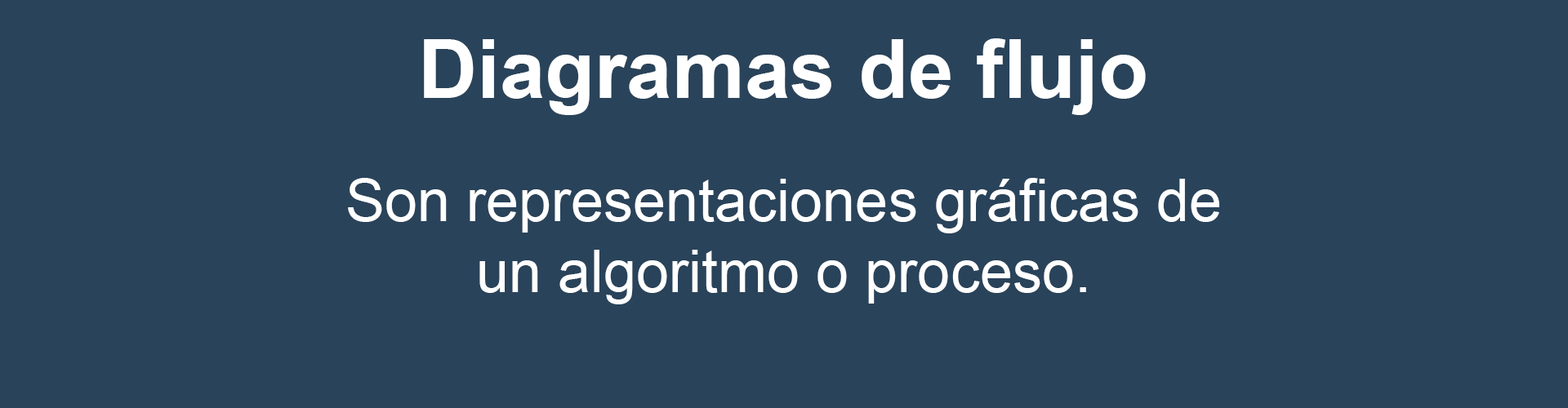
<style>
.page{position:relative;width:1568px;height:408px;background:#29435a}
.page>*{position:absolute;margin:0}
.t1{font:81.7px "Arial-BoldMT";color:#ffffff}
.t2{font:58.8px "ArialMT";color:#ffffff}
</style>
<div class="page">
<p class="t1" style="left:424px;top:38px;width:722px;height:77px">Diagramas de flujo</p>
<p class="t2" style="left:348px;top:178px;width:872px;height:127px;text-align:center">Son representaciones gráficas de<br>un algoritmo o proceso.</p>
</div>
